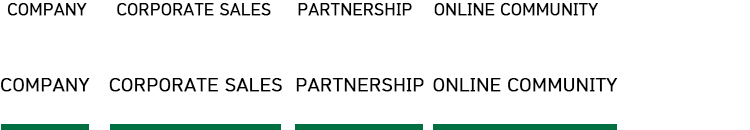
<style>
.page{position:relative;width:750px;height:130px;background:#ffffff}
.page>*{position:absolute;margin:0}
.t1{font:16px "HCRDotum";color:#000000;font-weight:bold}
.t2{font:18px "HCRDotum";color:#000000;font-weight:bold}
</style>
<div class="page">
<p class="t1" style="left:7px;top:3px;width:80px;height:13px">COMPANY</p>
<p class="t1" style="left:117px;top:3px;width:154px;height:13px">CORPORATE SALES</p>
<p class="t1" style="left:298px;top:3px;width:114px;height:13px">PARTNERSHIP</p>
<p class="t1" style="left:434px;top:3px;width:164px;height:13px">ONLINE COMMUNITY</p>
<p class="t2" style="left:1px;top:78px;width:89px;height:14px">COMPANY</p>
<p class="t2" style="left:109px;top:78px;width:173px;height:14px">CORPORATE SALES</p>
<p class="t2" style="left:296px;top:78px;width:128px;height:14px">PARTNERSHIP</p>
<p class="t2" style="left:433px;top:78px;width:185px;height:14px">ONLINE COMMUNITY</p>
</div>
